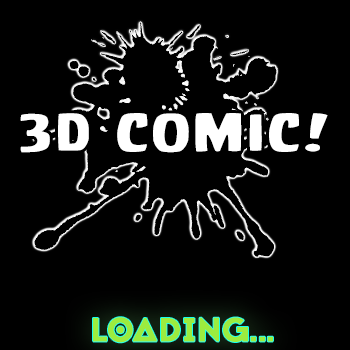
<style>
.page{position:relative;width:350px;height:350px;background:#000000}
.page>*{position:absolute;margin:0}
.t1{font:46.9px "CCBattleCry";letter-spacing:0.04em;color:#ffffff;scale:1.45 1}
.t2{font:33px "Jaapokkienchance-Regular";color:#9cec3f;font-weight:bold}
.t3{font:33px "Jaapokki-Regular";color:#9cec3f;font-weight:bold}
</style>
<div class="page">
<p class="t1" style="left:20px;top:113px;width:308px;height:40px">3D comic!</p>
<p class="t2" style="left:93px;top:317px;width:180px;height:26px">LOA<span class="t3">D</span>IN<span class="t3">G</span>...</p>
</div>
